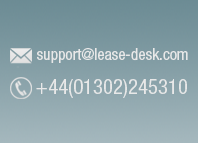
<style>
.page{position:relative;width:198px;height:143px}
.page>*{position:absolute;margin:0}
.t1{font:16px "HelveticaNeueLTPro-Cn";color:#e8e8e8}
.t2{font:20.8px "HelveticaNeueLTPro-Cn";color:#e8e8e8}
</style>
<div class="page">
<p class="t1" style="left:37px;top:48px;width:151px;height:15px">support@lease-desk.com</p>
<p class="t2" style="left:36px;top:79px;width:151px;height:19px">+44(01302)245310</p>
</div>
